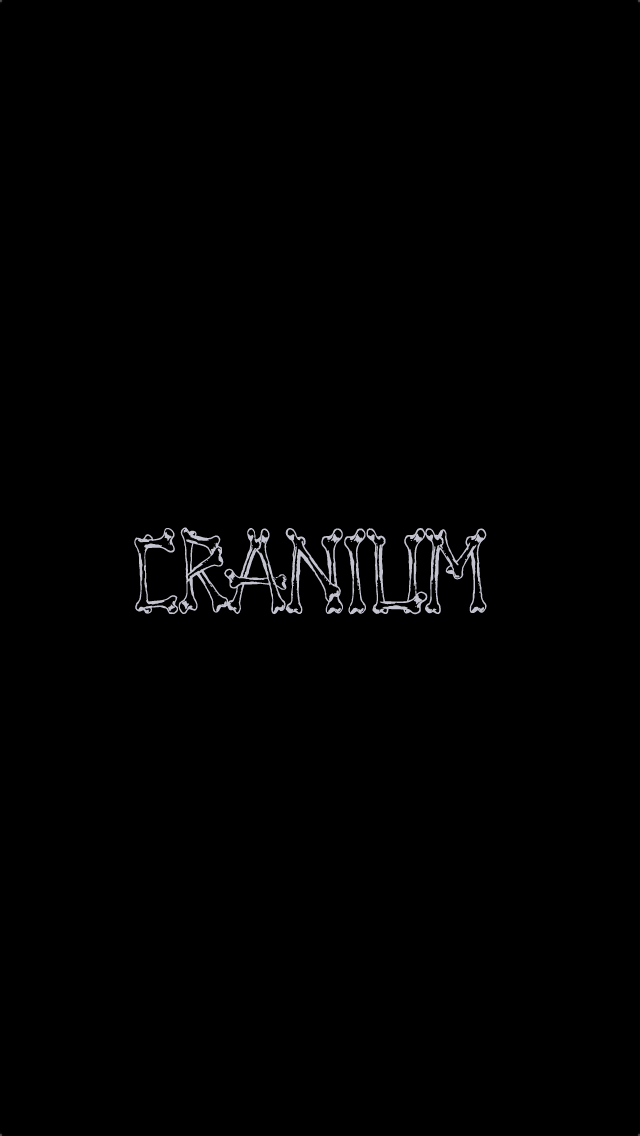
<style>
.page{position:relative;width:640px;height:1136px;background:#000000}
.page>*{position:absolute;margin:0}
.t1{font:111.2px "TengkorakCOE";letter-spacing:-0.05em;color:#c4c4d1}
</style>
<div class="page">
<p class="t1" style="left:134px;top:527px;width:353px;height:88px">cranium</p>
</div>
